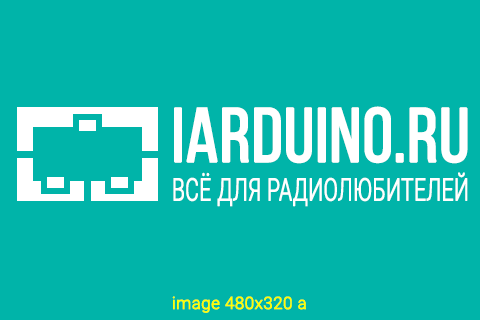
<style>
.page{position:relative;width:480px;height:320px;background:#00b4a9}
.page>*{position:absolute;margin:0}
.t1{font:76px "BebasNeueRegular";color:#ffffff;font-weight:bold}
.t2{font:31px "Roboto-Light";color:#ffffff;font-weight:bold;scale:0.67 1}
.t3{font:17px "Roboto-Light";color:#ffff00;font-weight:bold}
</style>
<div class="page">
<p class="t1" style="left:174px;top:106px;width:294px;height:58px">IARDUINO.RU</p>
<p class="t2" style="left:173px;top:172px;width:295px;height:35px">ВСЁ ДЛЯ РАДИОЛЮБИТЕЛЕЙ</p>
<p class="t3" style="left:172px;top:296px;width:134px;height:17px">image 480x320 a</p>
</div>
